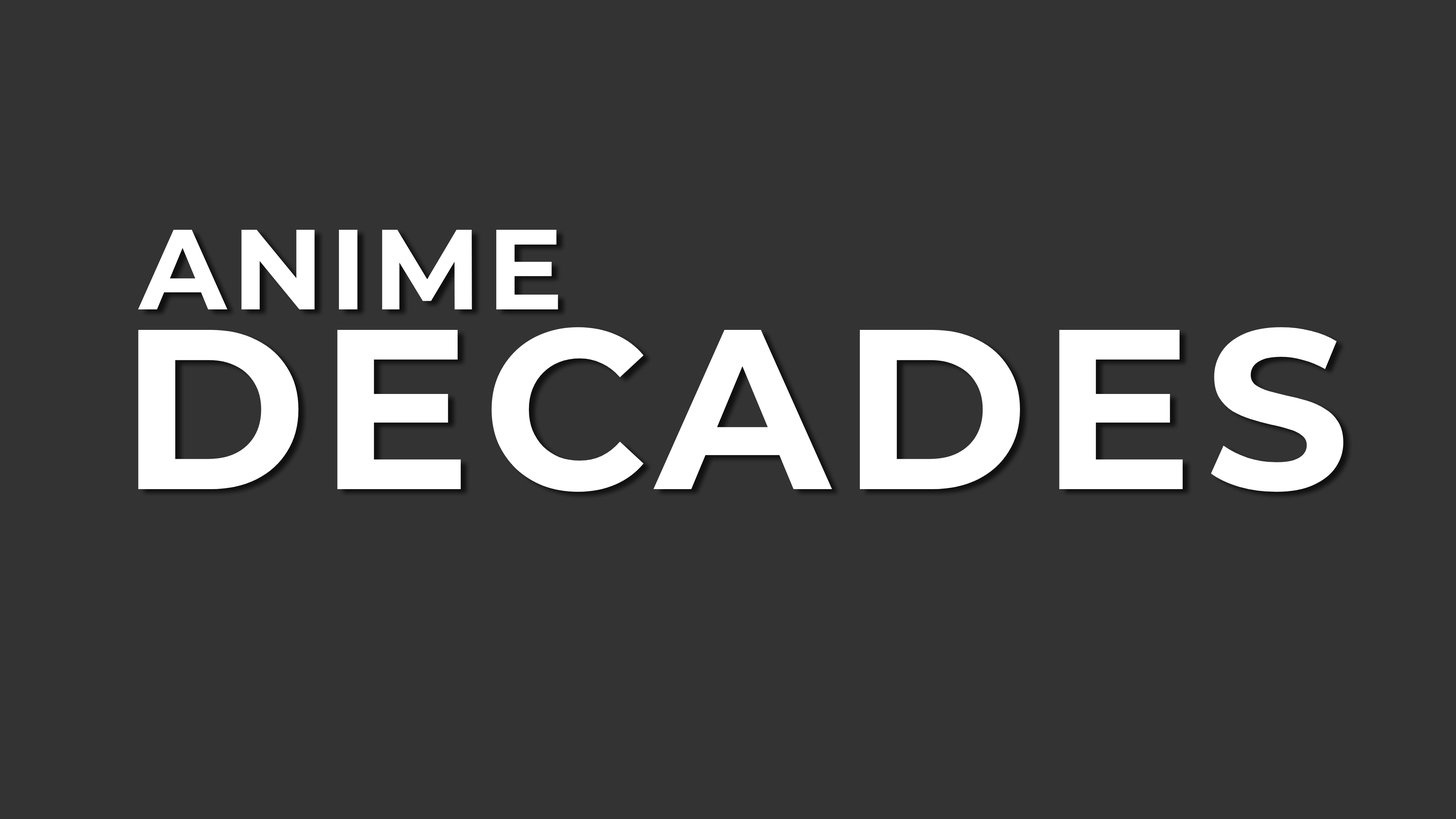
<style>
.page{position:relative;width:1456px;height:819px;background:#333333}
.page>*{position:absolute;margin:0}
.t1{font:113.7px "Montserrat-Bold";letter-spacing:0.05em;color:#ffffff}
.t2{font:227.5px "Montserrat-Bold";letter-spacing:0.05em;color:#ffffff}
</style>
<div class="page">
<p class="t1" style="left:138px;top:230px;width:420px;height:79px">ANIME</p>
<p class="t2" style="left:138px;top:327px;width:1205px;height:165px">DECADES</p>
</div>
